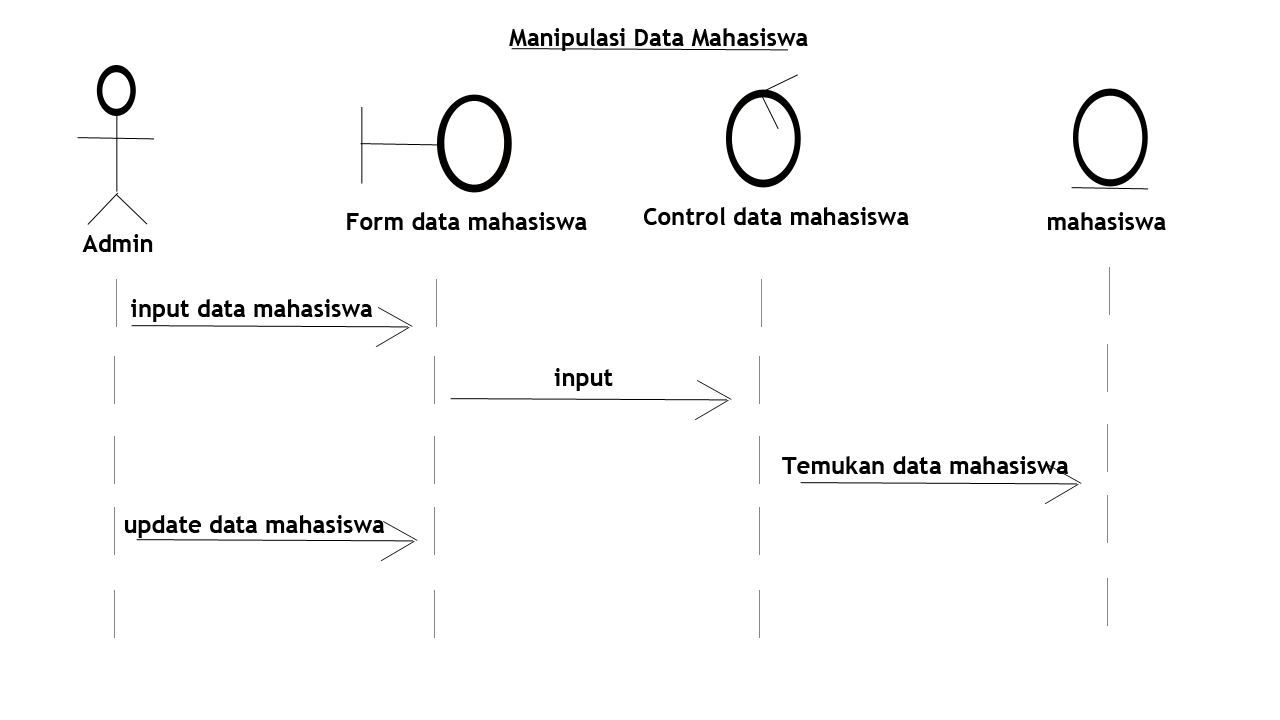
<style>
.page{position:relative;width:1280px;height:720px;background:#ffffff}
.page>*{position:absolute;margin:0}
.t1{font:24px "TrebuchetMS-Bold";color:#000000}
</style>
<div class="page">
<p class="t1" style="left:509px;top:28px;width:299px;height:23px">Manipulasi Data Mahasiswa</p>
<p class="t1" style="left:644px;top:207px;width:265px;height:18px">Control data mahasiswa</p>
<p class="t1" style="left:347px;top:212px;width:240px;height:18px">Form data mahasiswa</p>
<p class="t1" style="left:1048px;top:212px;width:118px;height:18px">mahasiswa</p>
<p class="t1" style="left:82px;top:234px;width:71px;height:18px">Admin</p>
<p class="t1" style="left:131px;top:299px;width:242px;height:23px">input data mahasiswa</p>
<p class="t1" style="left:554px;top:368px;width:59px;height:23px">input</p>
<p class="t1" style="left:782px;top:456px;width:287px;height:18px">Temukan data mahasiswa</p>
<p class="t1" style="left:125px;top:515px;width:260px;height:23px">update data mahasiswa</p>
</div>
